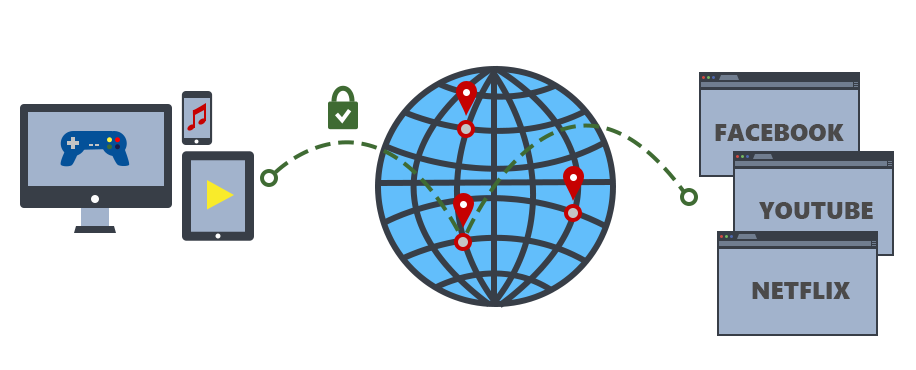
<style>
.page{position:relative;width:916px;height:370px;background:#ffffff}
.page>*{position:absolute;margin:0}
.t1{font:24px "SegoeUIBlack";color:#4b4a4a}
</style>
<div class="page">
<p class="t1" style="left:715px;top:124px;width:129px;height:17px">FACEBOOK</p>
<p class="t1" style="left:759px;top:202px;width:114px;height:17px">YOUTUBE</p>
<p class="t1" style="left:752px;top:282px;width:98px;height:17px">NETFLIX</p>
</div>
